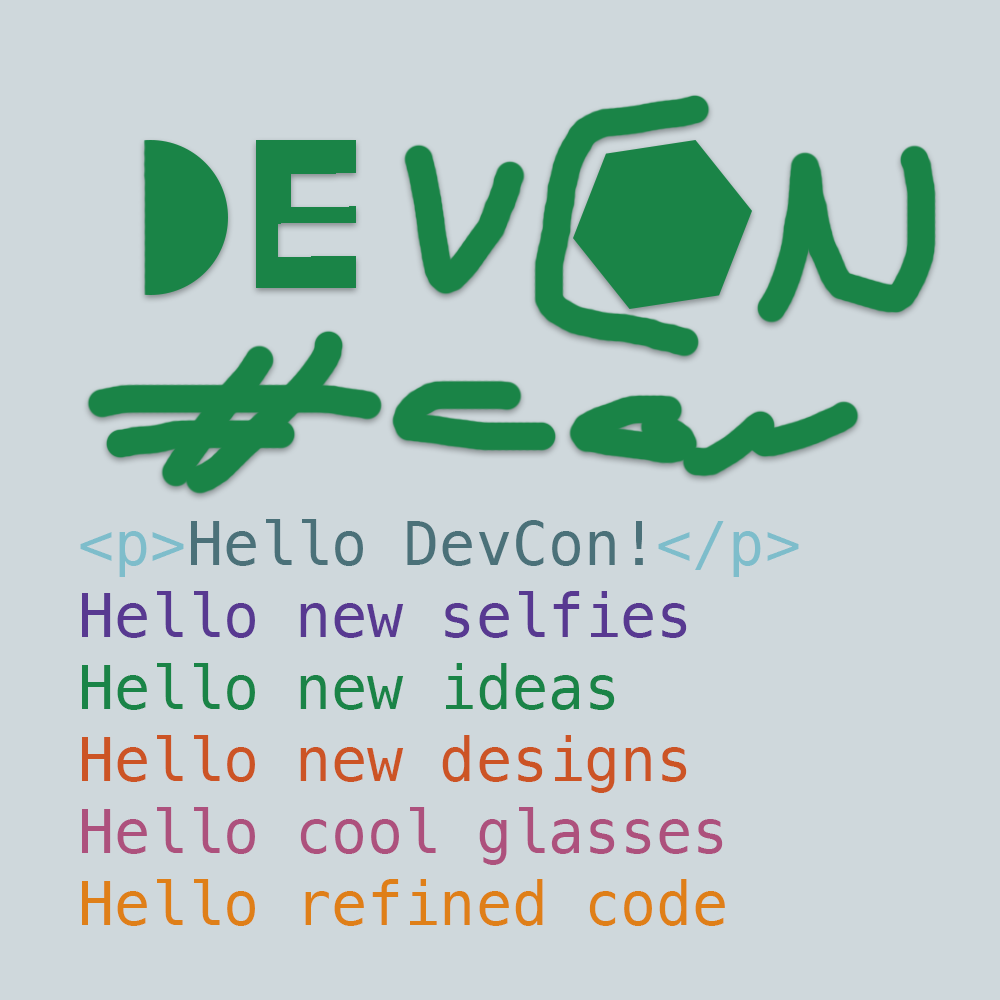
<style>
.page{position:relative;width:1000px;height:1000px;background:#cfd8dc}
.page>*{position:absolute;margin:0}
.t1{font:60px "Menlo-Regular";color:#ad517d}
.t2{font:60px "Menlo-Regular";color:#7ebdcb}
.t3{font:60px "Menlo-Regular";color:#4b7179}
.t4{font:60px "Menlo-Regular";color:#583991}
.t5{font:60px "Menlo-Regular";color:#1a8447}
.t6{font:60px "Menlo-Regular";color:#cc5425}
.t7{font:60px "Menlo-Regular";color:#df7f18}
</style>
<div class="page">
<p class="t1" style="left:80px;top:519px;width:719px;height:407px"><span class="t2">&lt;p&gt;</span><span class="t3">Hello DevCon!</span><span class="t2">&lt;/p&gt;<br></span><span class="t4">Hello new selfies<br></span><span class="t5">Hello new ideas<br></span><span class="t6">Hello new designs<br></span>Hello cool glasses<br><span class="t7">Hello refined code</span></p>
</div>
